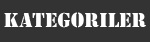
<style>
.page{position:relative;width:150px;height:42px;background:#333333}
.page>*{position:absolute;margin:0}
.t1{font:21.3px "Stencil";color:#ffffff}
</style>
<div class="page">
<p class="t1" style="left:4px;top:12px;width:142px;height:16px">Kategoriler</p>
</div>
